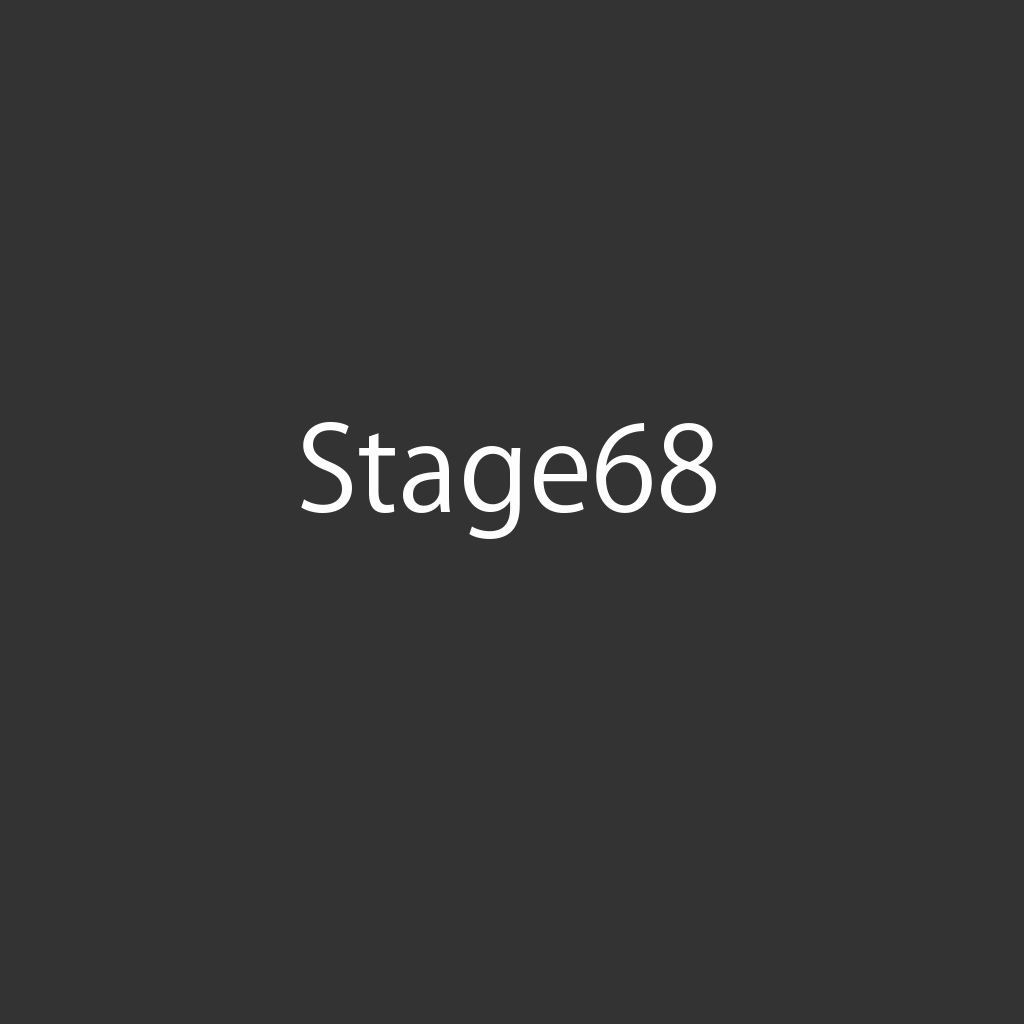
<style>
.page{position:relative;width:1024px;height:1024px;background:#333333}
.page>*{position:absolute;margin:0}
.t1{font:116.7px "KozGoPr6N-Regular";color:#fefefe}
</style>
<div class="page">
<p class="t1" style="left:301px;top:421px;width:415px;height:118px">Stage68</p>
</div>
